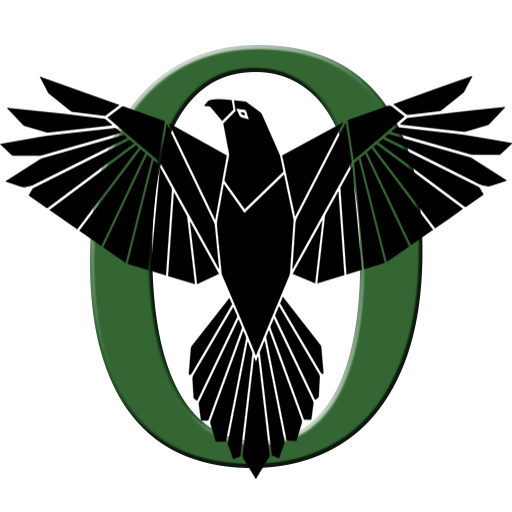
<style>
.page{position:relative;width:512px;height:512px;background:#ffffff}
.page>*{position:absolute;margin:0}
.t1{font:619px "Cambria"}
</style>
<div class="page">
<p class="t1" style="left:89px;top:44px;width:334px;height:424px">O</p>
</div>
